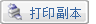
<style>
.page{position:relative;width:96px;height:24px;background:#f4f4f4}
.page>*{position:absolute;margin:0}
.t1{font:12px "SimSun";letter-spacing:0.1em;color:#3967a3}
</style>
<div class="page">
<p class="t1" style="left:30px;top:7px;width:51px;height:12px">打印副本</p>
</div>
